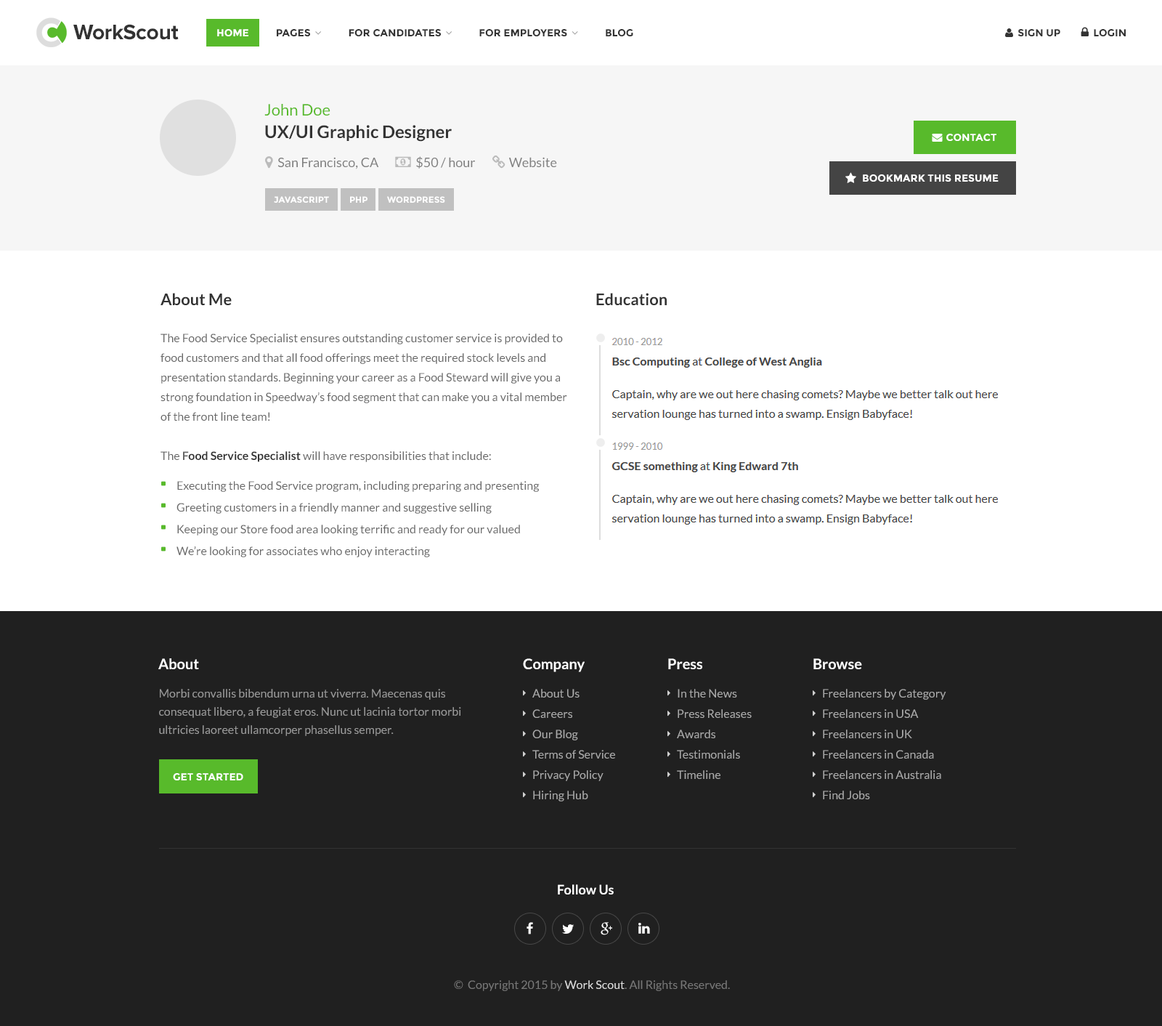
<style>
.page{position:relative;width:1162px;height:1026px;background:#202020}
.page>*{position:absolute;margin:0}
.t1{font:21.8px "ProximaNova-Bold";letter-spacing:-0.015em;color:#323232}
.t2{font:17.4px/22.5px "Lato-Bold";color:#333333}
.t3{font:16px/22.5px "Lato-Regular";color:#58ba2b}
.t4{font:10.2px "Montserrat-Bold";color:#ffffff;text-transform:uppercase}
.t5{font:8.7px "Montserrat-Bold";color:#ffffff;text-transform:uppercase}
.t6{font:11.6px/19.6px "Lato-Regular";color:#666666}
.t7{font:16px "Lato-Bold";color:#333333}
.t8{font:11.6px/19.6px "Lato-Bold";color:#666666}
.t9{font:11.6px/19.6px "Lato-Bold";color:#333333}
.t10{font:11.6px/21.8px "Lato-Regular";color:#666666}
.t11{font:14.5px "Lato-Bold";color:#ffffff}
.t12{font:11.6px/18.2px "Lato-Regular";color:#999999}
.t13{font:11.6px/20.3px "Lato-Regular";color:#aaaaaa}
.t14{font:13.1px "Lato-Bold";color:#ffffff}
.t15{font:11.6px "Lato-Regular";color:#777777}
.t16{font:11.6px "Lato-Regular";color:#dddddd}
</style>
<div class="page">
<p class="t1" style="left:73px;top:24px;width:106px;height:16px">WorkScout</p>
<p class="t2" style="left:264px;top:104px;width:188px;height:38px"><span class="t3">John Doe<br></span>UX/UI Graphic Designer</p>
<p class="t4" style="left:863px;top:174px;width:136px;height:8px">Bookmark This Resume</p>
<p class="t5" style="left:274px;top:196px;width:55px;height:7px">JavaScript</p>
<p class="t5" style="left:350px;top:196px;width:18px;height:7px">PHP</p>
<p class="t5" style="left:387px;top:196px;width:58px;height:7px">WordPress</p>
<p class="t6" style="left:161px;top:293px;width:406px;height:264px"><span class="t7">About Me<br> <br></span>The Food Service Specialist ensures outstanding customer service is provided to food customers and that all food offerings meet the required stock levels and presentation standards. Beginning your career as a Food Steward will give you a strong foundation in Speedway’s food segment that can make you a vital member of the front line team!<br><br>The <span class="t8">F</span><span class="t9">ood Service Specialist </span>will have responsibilities that include:<br> <br>           Executing the Food Service program, including preparing and presenting<br>           <span class="t10">Greeting customers in a friendly manner and suggestive selling<br>           Keeping our Store food area looking terrific and ready for our valued<br>           We’re looking for associates who enjoy interacting</span></p>
<p class="t7" style="left:596px;top:293px;width:71px;height:12px">Education</p>
<p class="t11" style="left:158px;top:658px;width:41px;height:11px">About</p>
<p class="t11" style="left:523px;top:658px;width:62px;height:14px">Company</p>
<p class="t11" style="left:668px;top:658px;width:35px;height:11px">Press</p>
<p class="t11" style="left:814px;top:658px;width:48px;height:11px">Browse</p>
<p class="t12" style="left:159px;top:689px;width:302px;height:47px">Morbi convallis bibendum urna ut viverra. Maecenas quis <br>consequat libero, a feugiat eros. Nunc ut lacinia tortor morbi ultricies laoreet ullamcorper phasellus semper.</p>
<p class="t13" style="left:533px;top:689px;width:82px;height:112px">About Us<br>Careers<br>Our Blog<br>Terms of Service<br>Privacy Policy<br>Hiring Hub</p>
<p class="t13" style="left:677px;top:689px;width:75px;height:90px">In the News<br>Press Releases<br>Awards<br>Testimonials<br>Timeline</p>
<p class="t13" style="left:823px;top:689px;width:124px;height:110px">Freelancers by Category<br>Freelancers in USA<br>Freelancers in UK<br>Freelancers in Canada<br>Freelancers in Australia<br>Find Jobs</p>
<p class="t4" style="left:173px;top:773px;width:70px;height:7px">Get Started</p>
<p class="t14" style="left:558px;top:884px;width:56px;height:10px">Follow Us</p>
<p class="t15" style="left:454px;top:980px;width:276px;height:11px">©  Copyright 2015 by <span class="t16">Work Scout</span>. All Rights Reserved.</p>
</div>
